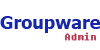
<style>
.page{position:relative;width:100px;height:50px;background:#ffffff}
.page>*{position:absolute;margin:0}
.t1{font:18px "Tahoma-Bold";color:#1627aa}
.t2{font:13px "Fixedsys";color:#ba2d48}
</style>
<div class="page">
<p class="t1" style="left:0px;top:16px;width:100px;height:17px">Groupware</p>
<p class="t2" style="left:65px;top:32px;width:31px;height:9px">Admin</p>
</div>
